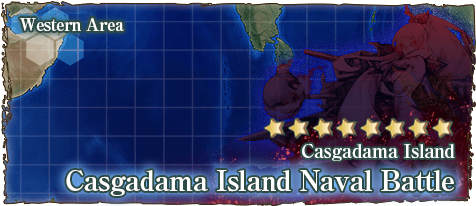
<style>
.page{position:relative;width:476px;height:206px}
.page>*{position:absolute;margin:0}
.t1{font:17px "RyuminPro-ExBold";letter-spacing:-0.04em;color:#ffffff}
.t2{font:19px "RyuminPro-ExBold";letter-spacing:-0.04em;color:#ffffff}
.t3{font:28px "RyuminPro-ExBold";letter-spacing:-0.04em;color:#ffffff}
</style>
<div class="page">
<p class="t1" style="left:19px;top:18px;width:105px;height:14px">Western Area</p>
<p class="t2" style="left:302px;top:143px;width:153px;height:18px">Casgadama Island</p>
<p class="t3" style="left:66px;top:170px;width:388px;height:26px">Casgadama Island Naval Battle</p>
</div>
